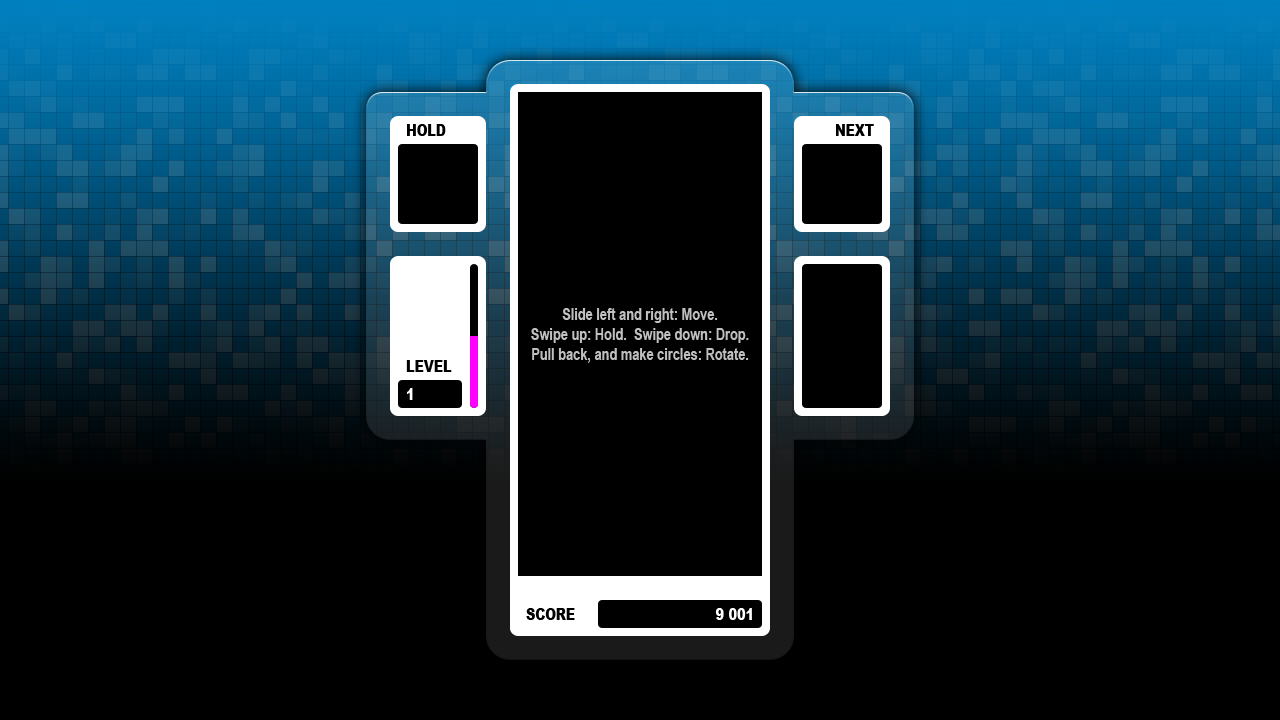
<style>
.page{position:relative;width:1280px;height:720px;background:#000000}
.page>*{position:absolute;margin:0}
.t1{font:16px "Arial-Black";color:#000000;text-transform:uppercase;scale:0.8 1}
.t2{font:16px "Arial-BoldMT";color:#c0c0c0;scale:0.8 1}
.t3{font:16px "Arial-Black";color:#ffffff;scale:0.8 1}
</style>
<div class="page">
<p class="t1" style="left:407px;top:124px;width:39px;height:12px">Hold</p>
<p class="t1" style="left:836px;top:124px;width:38px;height:12px">Next</p>
<p class="t2" style="left:562px;top:308px;width:156px;height:15px">Slide left and right: Move.</p>
<p class="t2" style="left:531px;top:328px;width:218px;height:15px">Swipe up: Hold.  Swipe down: Drop.</p>
<p class="t2" style="left:532px;top:348px;width:217px;height:15px">Pull back, and make circles: Rotate.</p>
<p class="t1" style="left:406px;top:360px;width:46px;height:12px">Level</p>
<p class="t3" style="left:407px;top:388px;width:6px;height:12px">1</p>
<p class="t1" style="left:526px;top:608px;width:49px;height:12px">Score</p>
<p class="t3" style="left:715px;top:608px;width:37px;height:12px">9 001</p>
</div>
